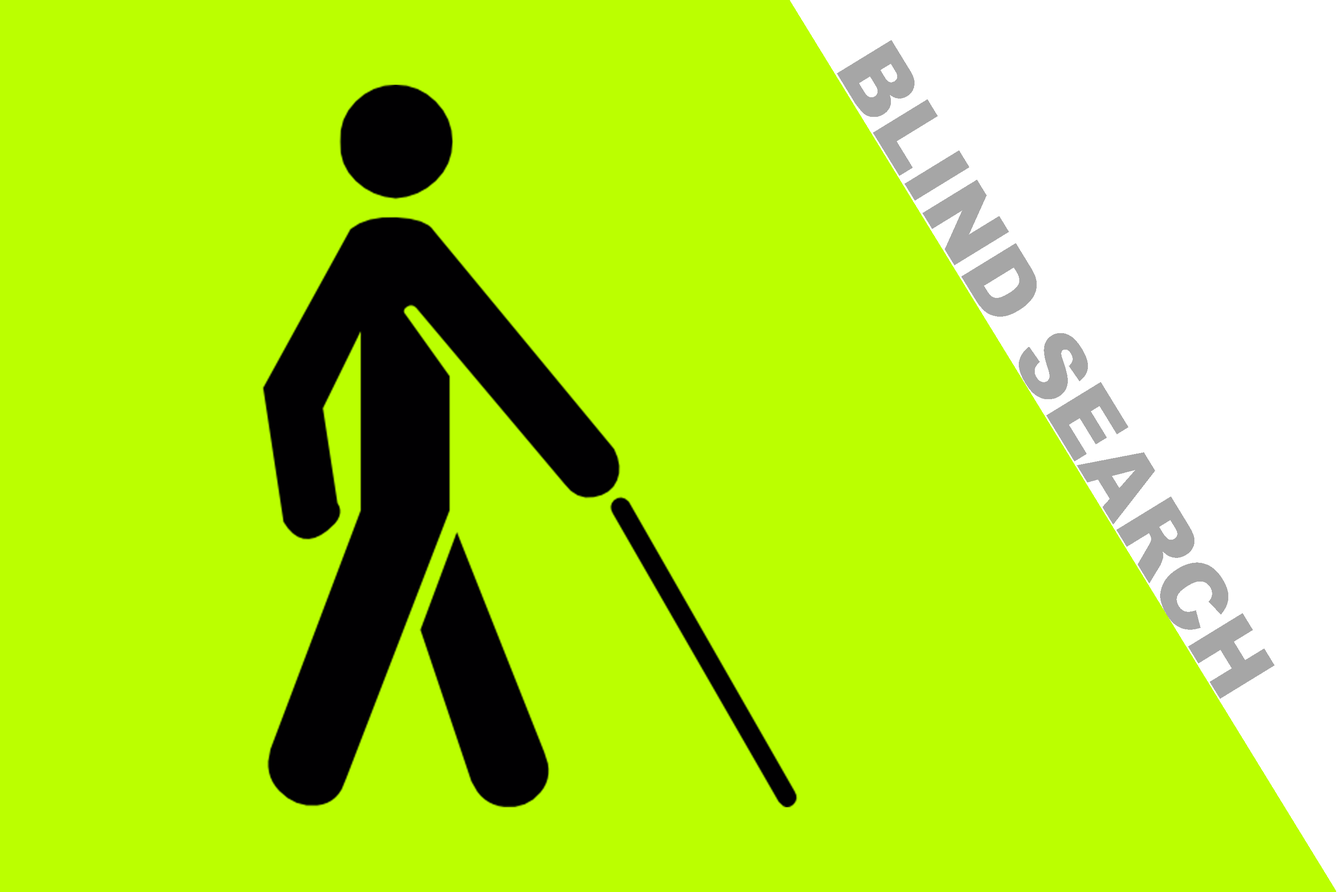
<style>
.page{position:relative;width:1337px;height:892px;background:#bbff00}
.page>*{position:absolute;margin:0}
.t1{font:89.2px "Arial-Black";color:#a6a6a6}
</style>
<div class="page">
<p class="t1" style="left:837px;top:40px;width:438px;height:659px;rotate:59deg">BLIND SEARCH</p>
</div>
